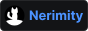
<style>
.page{position:relative;width:88px;height:31px;background:#131416}
.page>*{position:absolute;margin:0}
.t1{font:13px "Inter-Bold";color:#4c93ff}
</style>
<div class="page">
<p class="t1" style="left:29px;top:10px;width:55px;height:13px">Nerimity</p>
</div>
